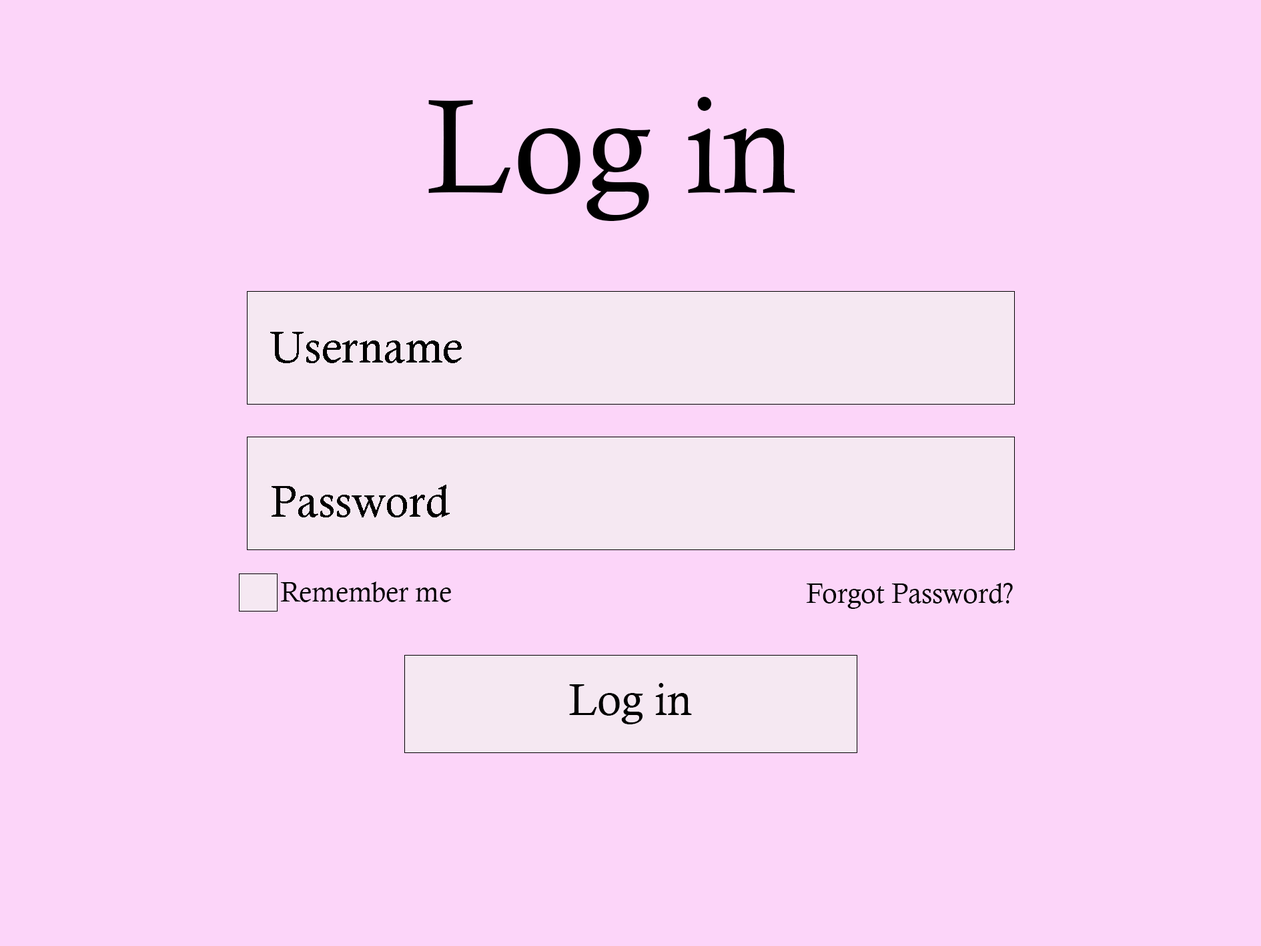
<style>
.page{position:relative;width:1261px;height:946px;background:#fcd5f9}
.page>*{position:absolute;margin:0}
.t1{font:133.5px "CalistoMT";color:#000000}
.t2{font:44.5px "CalistoMT";color:#000000}
.t3{font:27.8px "CalistoMT";color:#000000}
</style>
<div class="page">
<p class="t1" style="left:428px;top:97px;width:367px;height:124px">Log in</p>
<p class="t2" style="left:270px;top:332px;width:192px;height:31px">Username</p>
<p class="t2" style="left:272px;top:484px;width:178px;height:33px">Password</p>
<p class="t3" style="left:280px;top:581px;width:171px;height:21px">Remember me</p>
<p class="t3" style="left:806px;top:583px;width:207px;height:26px">Forgot Password?</p>
<p class="t2" style="left:569px;top:683px;width:123px;height:41px">Log in</p>
</div>
